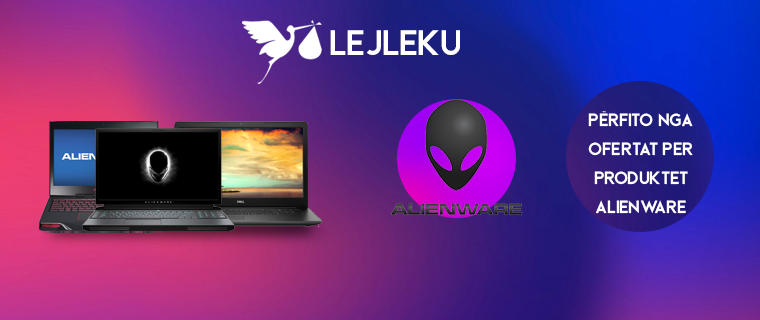
<style>
.page{position:relative;width:760px;height:320px}
.page>*{position:absolute;margin:0}
.t1{font:36px "BeckmanFree";letter-spacing:-0.02em;color:#ffffff}
.t2{font:18px/29px "BeckmanFree";letter-spacing:-0.02em;color:#ffffff}
</style>
<div class="page">
<p class="t1" style="left:330px;top:30px;width:130px;height:25px">LEJLEKU</p>
<p class="t2" style="left:588px;top:111px;width:105px;height:103px;text-align:center">përfito nga ofertat per produktet alienware</p>
</div>
